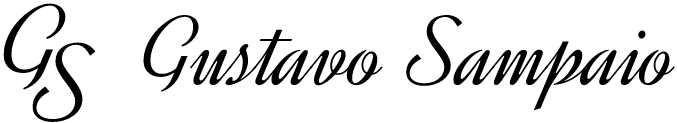
<style>
.page{position:relative;width:677px;height:123px;background:#ffffff}
.page>*{position:absolute;margin:0}
.t1{font:112px "Dynalight-Regular";color:#000000}
.t2{font:100px "Dynalight-Regular";color:#000000}
</style>
<div class="page">
<p class="t1" style="left:3px;top:3px;width:63px;height:87px">G</p>
<p class="t2" style="left:143px;top:14px;width:532px;height:97px">Gustavo Sampaio</p>
<p class="t1" style="left:32px;top:42px;width:64px;height:80px">S</p>
</div>
